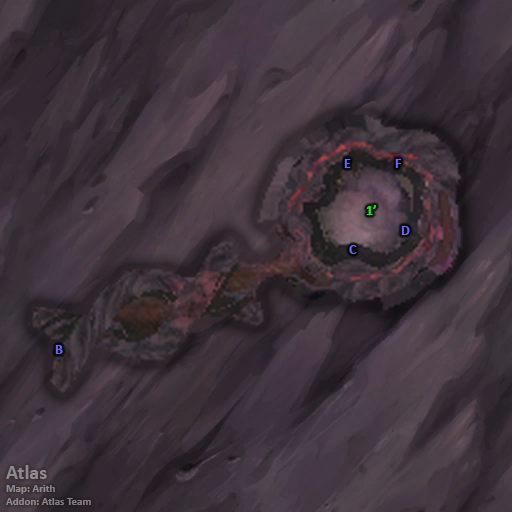
<style>
.page{position:relative;width:512px;height:512px}
.page>*{position:absolute;margin:0}
.t1{font:14px "Calibri-Bold";color:#6666ff}
.t2{font:14px "Calibri-Bold";color:#00ff00}
.t3{font:11px "Calibri-Bold";color:#8e898e}
.t4{font:20px "Calibri-Bold";color:#8e898e}
</style>
<div class="page">
<p class="t1" style="left:344px;top:159px;width:7px;height:9px">E</p>
<p class="t1" style="left:395px;top:159px;width:6px;height:9px">F</p>
<p class="t2" style="left:366px;top:205px;width:10px;height:10px">1’</p>
<p class="t1" style="left:401px;top:226px;width:9px;height:9px">D</p>
<p class="t1" style="left:349px;top:245px;width:8px;height:9px">C</p>
<p class="t1" style="left:55px;top:345px;width:8px;height:9px">B</p>
<p class="t3" style="left:6px;top:465px;width:85px;height:40px"><span class="t4">Atlas<br></span>Map: Arith<br>Addon: Atlas Team</p>
</div>
